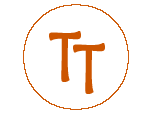
<style>
.page{position:relative;width:148px;height:114px;background:#ffffff}
.page>*{position:absolute;margin:0}
.t1{font:70px "MaiandraGD-Regular";color:#cc5500;font-weight:bold;scale:0.75 1}
</style>
<div class="page">
<p class="t1" style="left:49px;top:31px;width:32px;height:51px">T</p>
<p class="t1" style="left:73px;top:43px;width:32px;height:51px">T</p>
</div>
